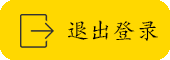
<style>
.page{position:relative;width:170px;height:60px;background:#ffd800}
.page>*{position:absolute;margin:0}
.t1{font:23.3px "¿¬Ìå";color:#000000}
</style>
<div class="page">
<p class="t1" style="left:68px;top:20px;width:90px;height:21px">退出登录</p>
</div>
